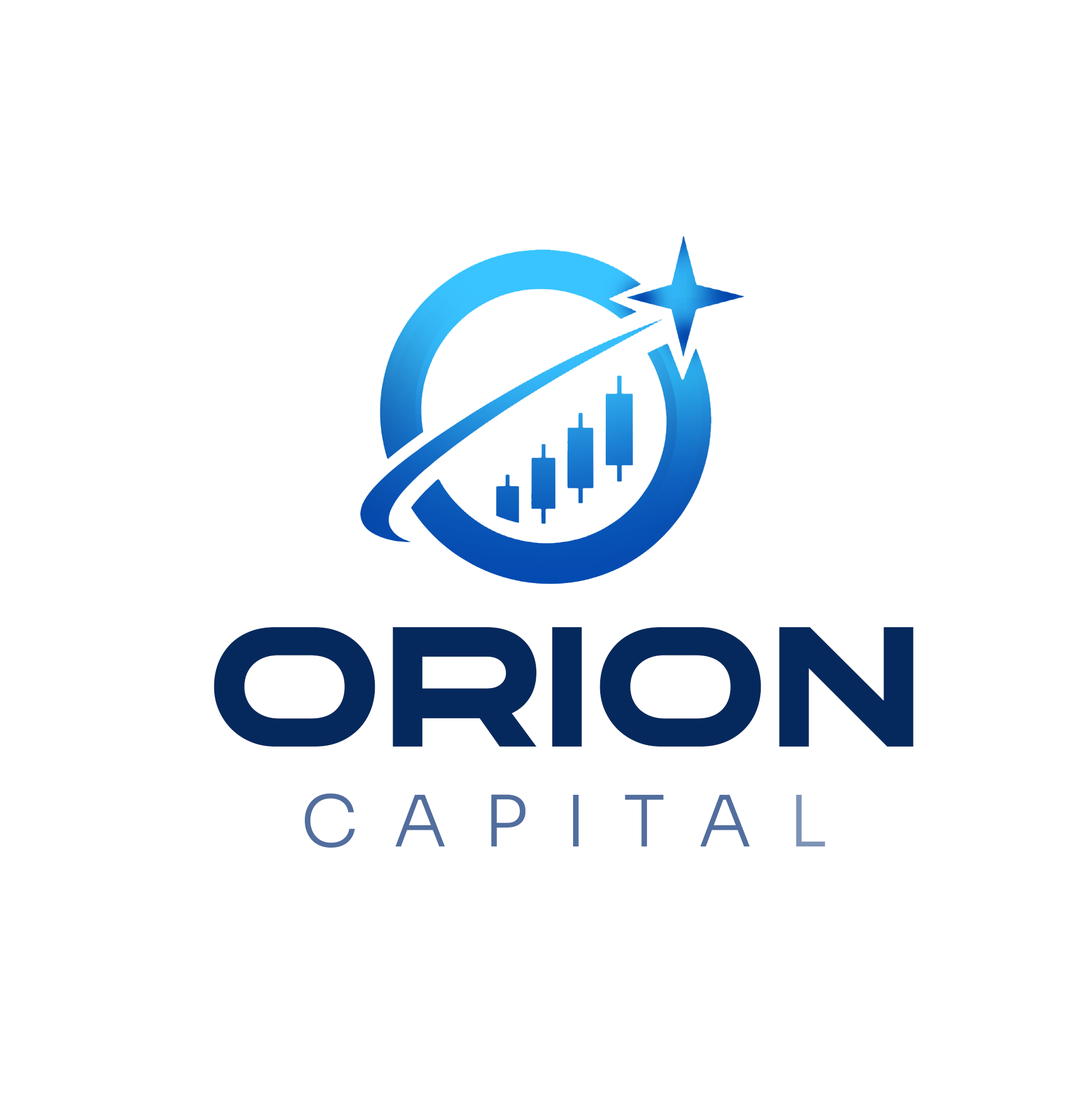
<style>
.page{position:relative;width:1085px;height:1099px;background:#ffffff}
.page>*{position:absolute;margin:0}
.t1{font:70.7px/99.9px "Sora-Light";letter-spacing:0.5em;color:#526e9e}
.t2{font:170.5px/99.9px "TBJOneMoreDemo-ExtraBold";color:#05295d}
.t3{font:70.7px/99.9px "Sora-Light";letter-spacing:0.5em;color:#7d94b7}
</style>
<div class="page">
<p class="t1" style="left:214px;top:627px;width:699px;height:221px;text-align:center"><span class="t2">ORION<br></span>CAPITA<span class="t3">L</span></p>
</div>
